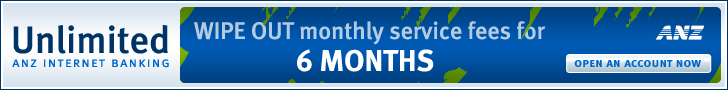
<style>
.page{position:relative;width:728px;height:90px}
.page>*{position:absolute;margin:0}
.t1{font:38px "MetaMediumLF-Roman";color:#003366}
.t2{font:24px "MetaMediumLF-Roman";color:#b3cce4}
.t3{font:30px "MetaBoldLF-Roman";color:#ffffff}
.t4{font:14px "MetaNormalLF-Caps";letter-spacing:0.086em;color:#0066cc}
.t5{font:13px "MetaBold-Caps";letter-spacing:0.01em;color:#0066cc}
</style>
<div class="page">
<p class="t1" style="left:13px;top:25px;width:155px;height:29px">Unlimited</p>
<p class="t2" style="left:194px;top:21px;width:352px;height:24px">WIPE OUT monthly service fees for</p>
<p class="t3" style="left:297px;top:49px;width:137px;height:23px">6 MONTHS</p>
<p class="t4" style="left:12px;top:59px;width:157px;height:9px">anz internet banking</p>
<p class="t5" style="left:574px;top:60px;width:127px;height:7px">open an account now</p>
</div>
